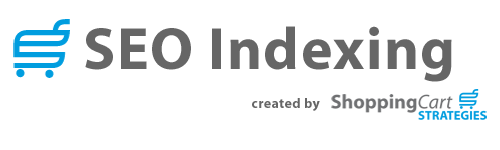
<style>
.page{position:relative;width:500px;height:150px;background:#ffffff}
.page>*{position:absolute;margin:0}
.t1{font:60px "MyriadPro-Bold";letter-spacing:0.025em;color:#666666}
.t2{font:14px "MyriadPro-Bold";letter-spacing:0.025em;color:#666666}
</style>
<div class="page">
<p class="t1" style="left:85px;top:26px;width:367px;height:56px">SEO Indexing</p>
<p class="t2" style="left:252px;top:98px;width:68px;height:13px">created by</p>
</div>
